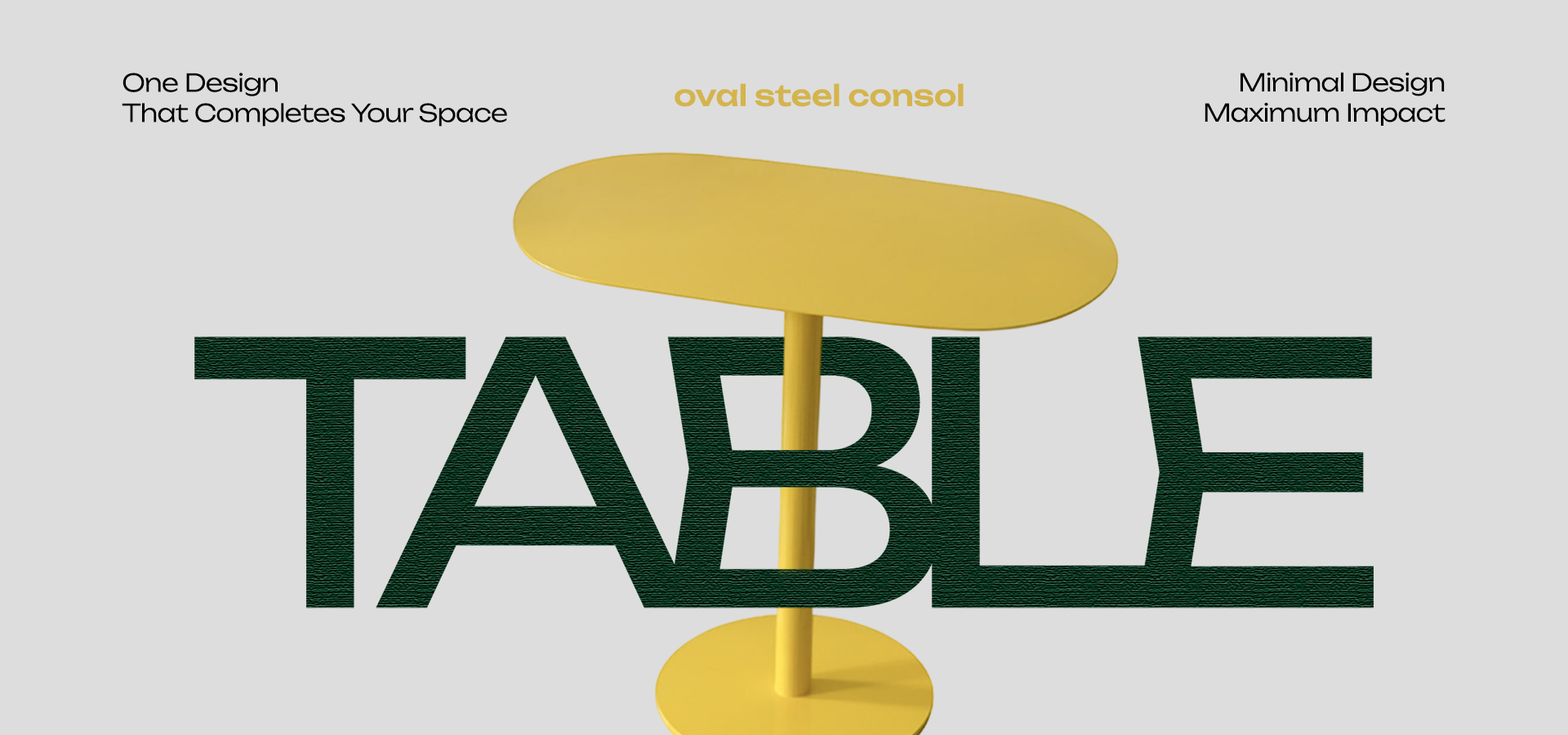
<style>
.page{position:relative;width:1568px;height:735px;background:#dddddd}
.page>*{position:absolute;margin:0}
.t1{font:24.5px/30.2px "Unbounded-Light";letter-spacing:-0.02em;color:#000000}
.t2{font:28.7px "Unbounded-Medium";color:#d4b44d}
</style>
<div class="page">
<p class="t1" style="left:122px;top:73px;width:385px;height:54px">One Design<br>That Completes Your Space</p>
<p class="t1" style="left:1205px;top:72px;width:241px;height:54px;text-align:right">Minimal Design<br>Maximum Impact</p>
<p class="t2" style="left:675px;top:83px;width:289px;height:24px">oval steel consol</p>
</div>
